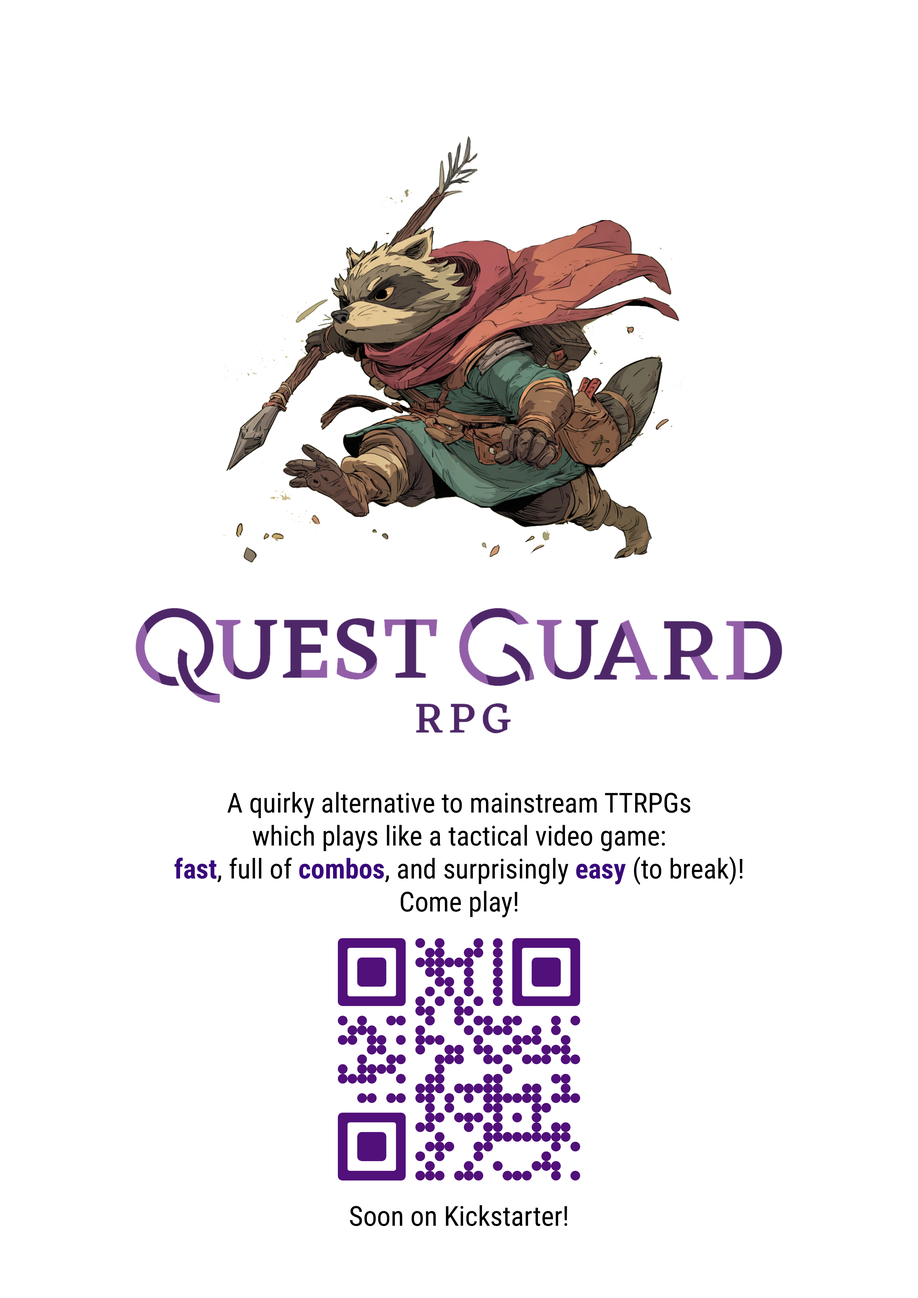
<style>
.page{position:relative;width:918px;height:1298px;background:#ffffff}
.page>*{position:absolute;margin:0}
.t1{font:27.5px "RobotoCondensed-Regular";color:#000000}
.t2{font:27.5px "RobotoCondensed-Bold";color:#39077c}
</style>
<div class="page">
<p class="t1" style="left:174px;top:792px;width:569px;height:126px;text-align:center">A quirky alternative to mainstream TTRPGs<br>which plays like a tactical video game:<br><span class="t2">fast</span>, full of <span class="t2">combos</span>, and surprisingly <span class="t2">easy</span> (to break)!<br>Come play!</p>
<p class="t1" style="left:350px;top:1206px;width:218px;height:21px">Soon on Kickstarter!</p>
</div>
